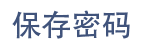
<style>
.page{position:relative;width:142px;height:48px;background:#ffffff}
.page>*{position:absolute;margin:0}
.t1{font:30px "AdobeHeitiStd-Regular";color:#40537b}
</style>
<div class="page">
<p class="t1" style="left:12px;top:10px;width:118px;height:29px">保存密码</p>
</div>
